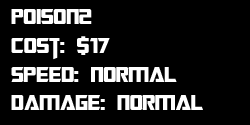
<style>
.page{position:relative;width:250px;height:125px;background:#000000}
.page>*{position:absolute;margin:0}
.t1{font:24px "TransformersMovie";color:#ffffff}
</style>
<div class="page">
<p class="t1" style="left:11px;top:9px;width:192px;height:101px">Poison2<br>Cost: $17<br>Speed: Normal<br>Damage: Normal</p>
</div>
